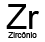
<style>
.page{position:relative;width:45px;height:42px;background:#ffffff}
.page>*{position:absolute;margin:0}
.t1{font:8px "ArialMT";color:#000000}
.t2{font:34.7px "ArialMT";color:#000000}
</style>
<div class="page">
<p class="t1" style="left:6px;top:4px;width:34px;height:34px;text-align:center"><span class="t2">Zr<br></span>Zircônio</p>
</div>
